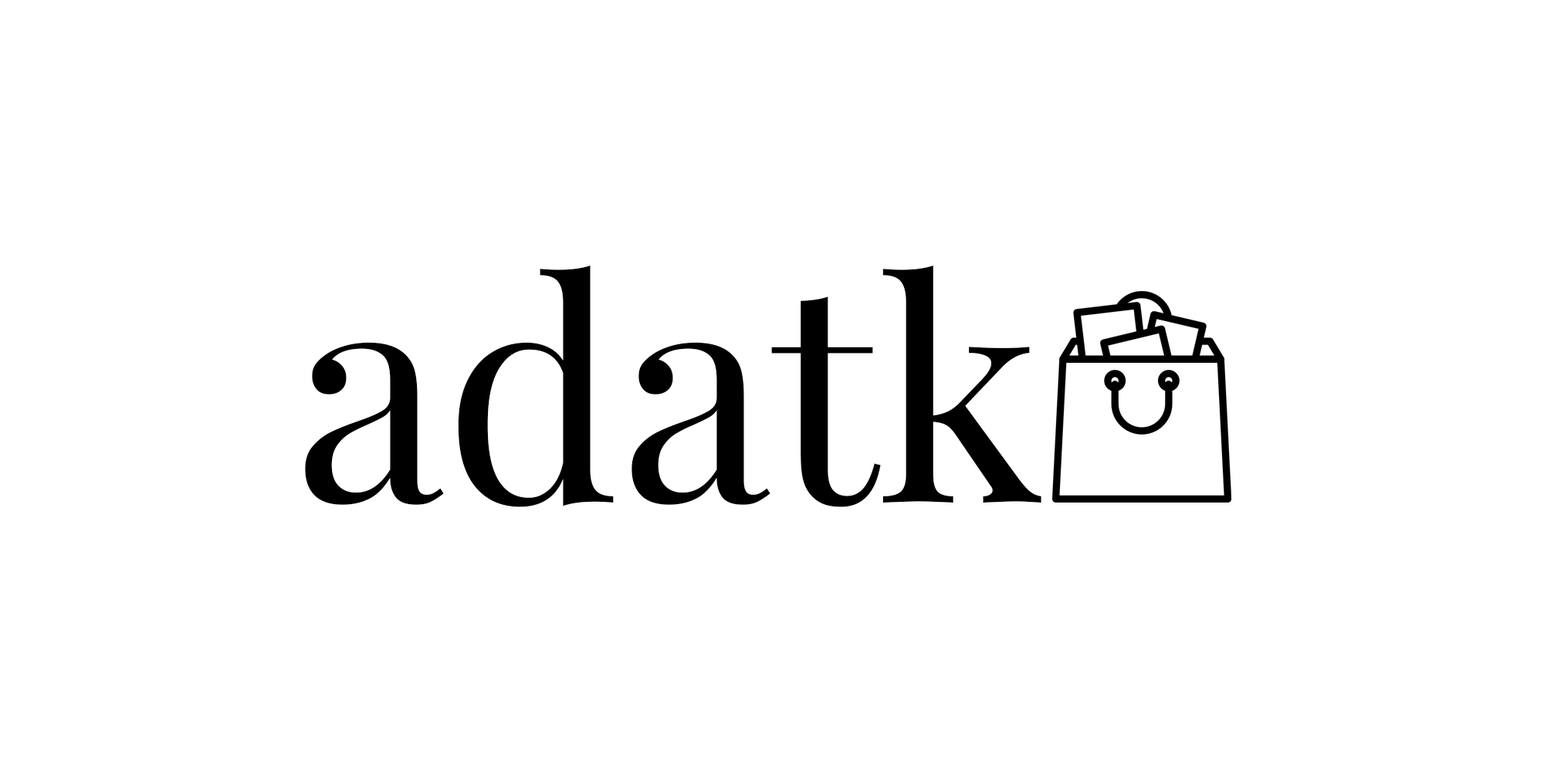
<style>
.page{position:relative;width:1544px;height:772px;background:#ffffff}
.page>*{position:absolute;margin:0}
.t1{font:302.4px "PlayfairDisplay-Regular";color:#000000}
</style>
<div class="page">
<p class="t1" style="left:305px;top:265px;width:737px;height:242px">adatk</p>
</div>
